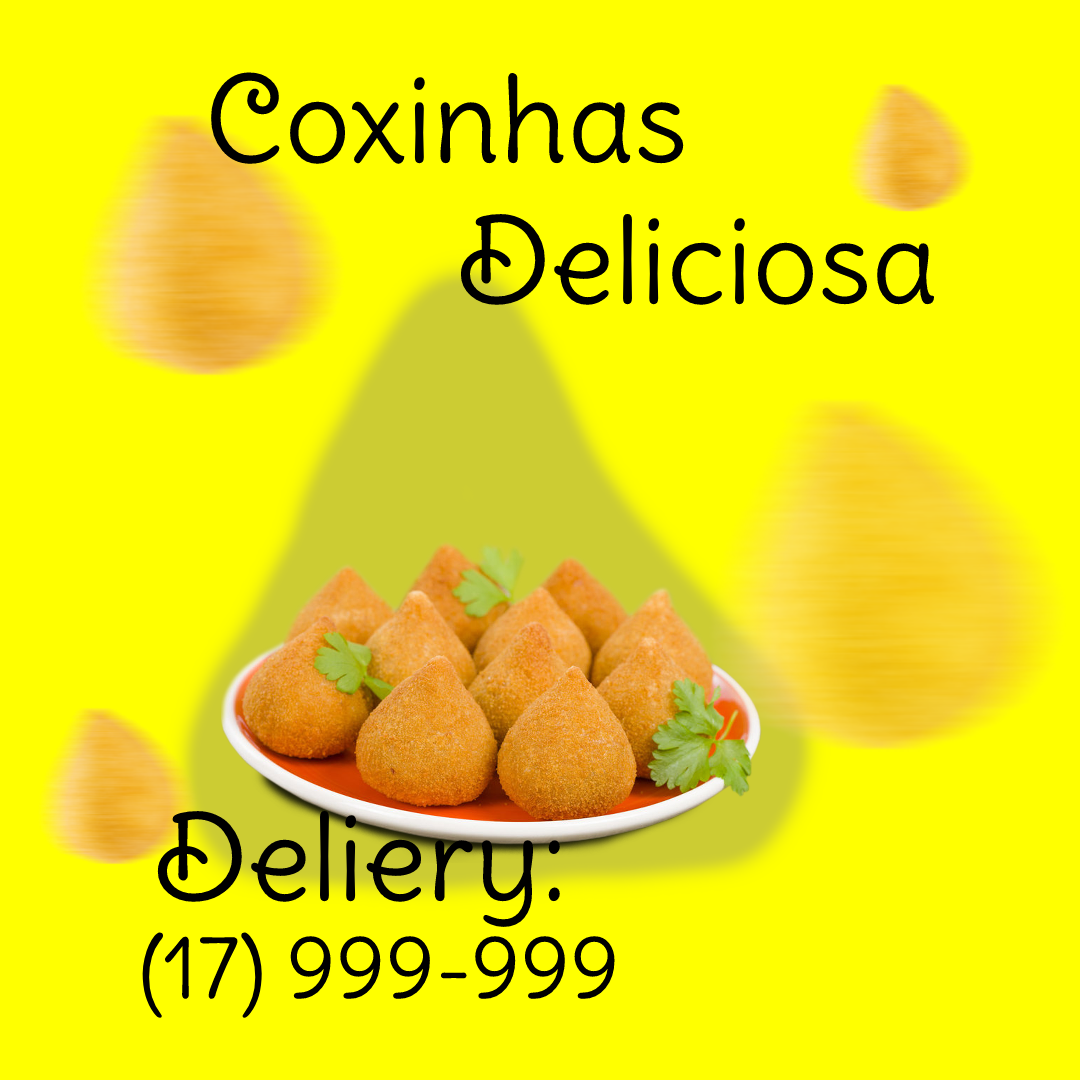
<style>
.page{position:relative;width:1080px;height:1080px;background:#ffff00}
.page>*{position:absolute;margin:0}
.t1{font:117px "DeliusSwashCaps-Regular";color:#000000}
.t2{font:86.3px "DeliusSwashCaps-Regular";color:#000000}
</style>
<div class="page">
<p class="t1" style="left:211px;top:72px;width:724px;height:233px">Coxinhas<br>         Deliciosa</p>
<p class="t1" style="left:157px;top:811px;width:403px;height:116px">Deliery:</p>
<p class="t2" style="left:142px;top:932px;width:473px;height:86px">(17) 999-999</p>
</div>
